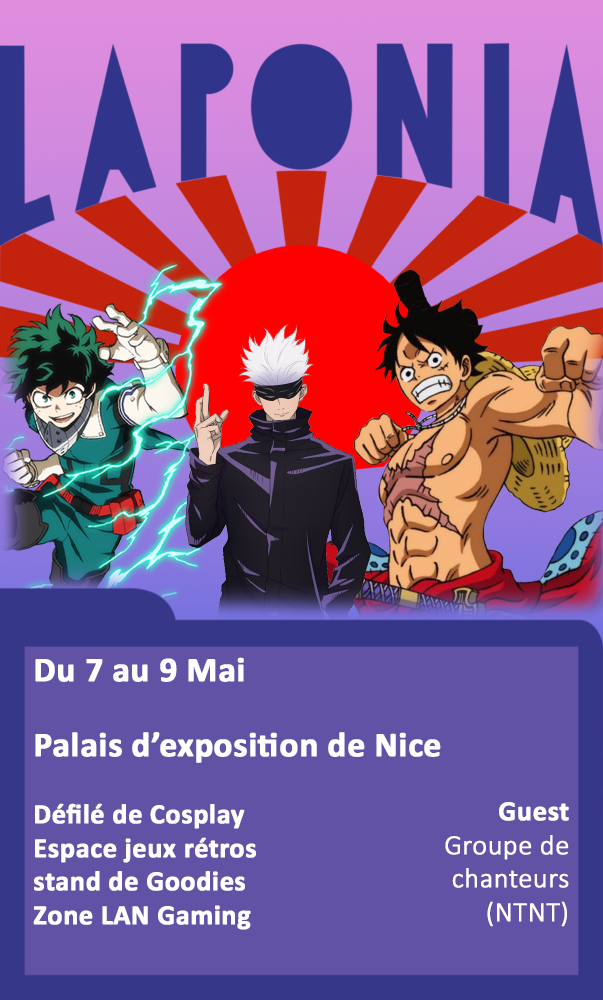
<style>
.page{position:relative;width:603px;height:1000px;background:#6252a6}
.page>*{position:absolute;margin:0}
.t1{font:28px "Calibri-Bold";color:#ffffff;font-weight:bold}
.t2{font:34.9px "Calibri-Bold";color:#ffffff;font-weight:bold}
.t3{font:28px "Calibri-Light";color:#ffffff;font-weight:bold}
</style>
<div class="page">
<p class="t1" style="left:33px;top:657px;width:408px;height:273px"><span class="t2">Du 7 au 9 Mai<br><br>Palais d’exposition de Nice <br>                                      <br></span>Défilé de Cosplay <br>Espace jeux rétros<br>stand de Goodies <br>Zone LAN Gaming</p>
<p class="t3" style="left:445px;top:802px;width:124px;height:125px;text-align:right"><span class="t1">Guest<br></span>Groupe de chanteurs (NTNT)</p>
</div>
